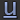
<style>
.page{position:relative;width:20px;height:20px;background:#333333}
.page>*{position:absolute;margin:0}
.t1{font:25px "LucidaGrande";letter-spacing:-0.025em;color:#8293be}
</style>
<div class="page">
<p class="t1" style="left:4px;top:2px;width:12px;height:13px">u</p>
</div>
